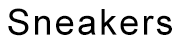
<style>
.page{position:relative;width:180px;height:45px;background:#ffffff}
.page>*{position:absolute;margin:0}
.t1{font:36px "ArialMT";letter-spacing:0.06em;color:#000000}
</style>
<div class="page">
<p class="t1" style="left:8px;top:8px;width:164px;height:28px">Sneakers</p>
</div>
